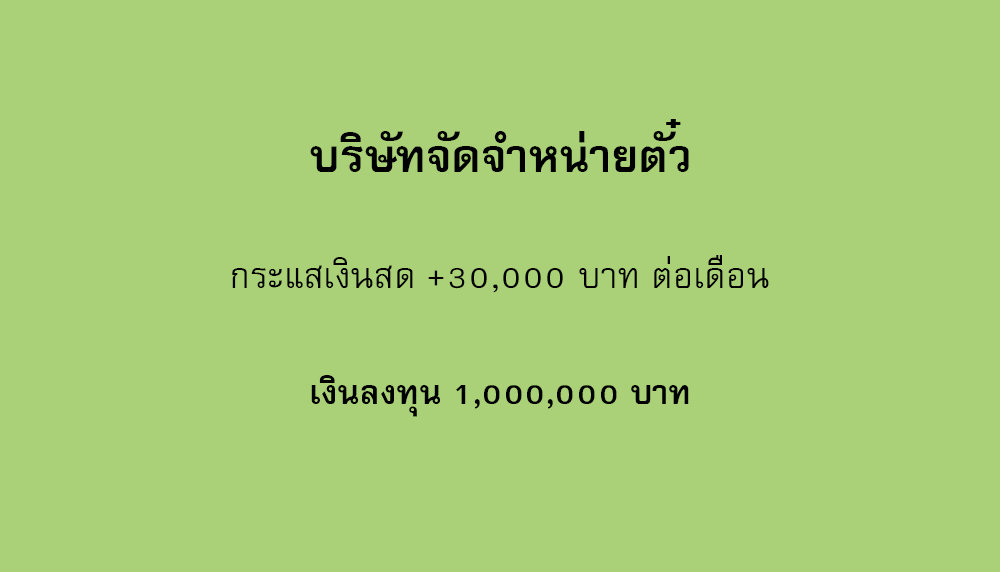
<style>
.page{position:relative;width:1000px;height:572px;background:#aad178}
.page>*{position:absolute;margin:0}
.t1{font:64px "FreesiaUPCBold";color:#000000}
.t2{font:50px "FreesiaUPC";color:#000000}
.t3{font:47px "FreesiaUPCBold";color:#000000}
</style>
<div class="page">
<p class="t1" style="left:310px;top:119px;width:379px;height:53px">บริษัทจัดจำหน่ายตั๋ว</p>
<p class="t2" style="left:232px;top:255px;width:537px;height:38px">กระแสเงินสด +30,000 บาท ต่อเดือน</p>
<p class="t3" style="left:311px;top:375px;width:378px;height:42px">เงินลงทุน 1,000,000 บาท</p>
</div>
